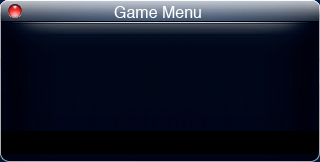
<style>
.page{position:relative;width:320px;height:162px}
.page>*{position:absolute;margin:0}
.t1{font:16px "Helvetica";color:#ffffff}
</style>
<div class="page">
<p class="t1" style="left:114px;top:6px;width:87px;height:12px">Game Menu</p>
</div>
